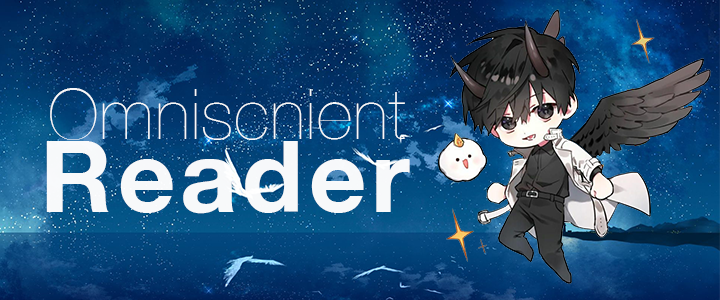
<style>
.page{position:relative;width:720px;height:300px}
.page>*{position:absolute;margin:0}
.t1{font:70px/73.3px "HelveticaNeue-UltraLight";letter-spacing:0.015em;color:#ffffff}
.t2{font:100px/73.3px "HelveticaNeue-Bold";letter-spacing:0.05em;color:#ffffff}
</style>
<div class="page">
<p class="t1" style="left:46px;top:88px;width:364px;height:126px;text-align:center;opacity:0.95">Omniscnient <br><span class="t2">Reader</span></p>
</div>
